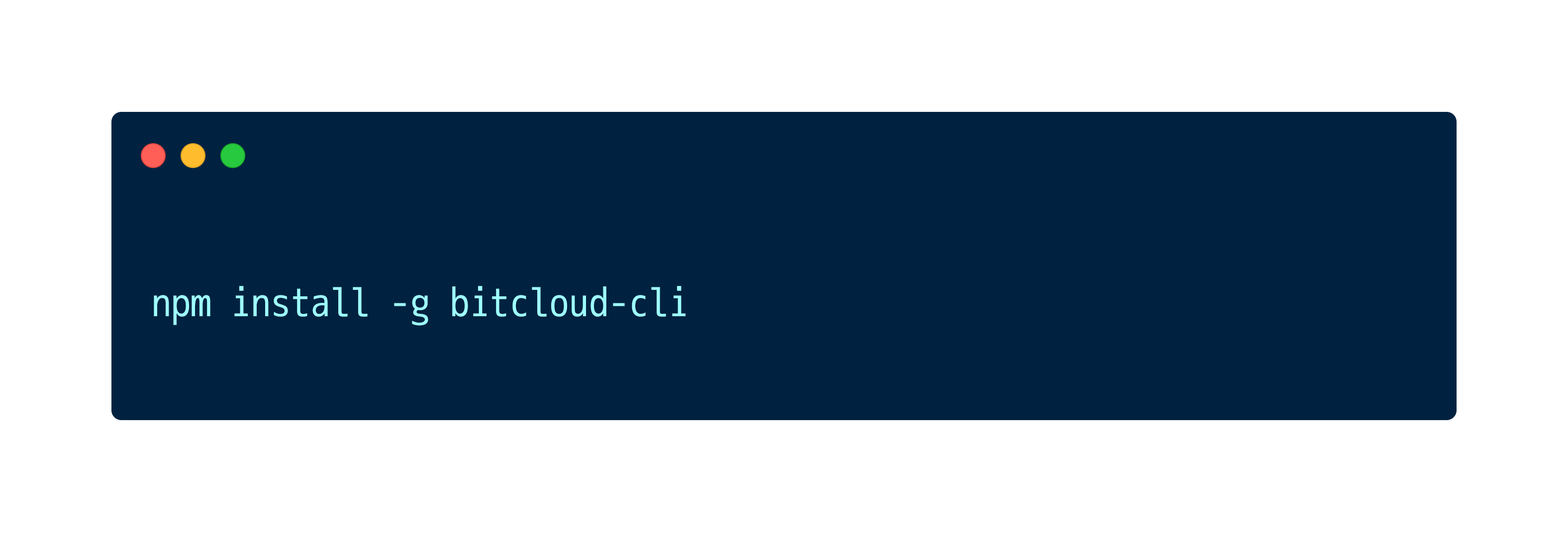
<style>
.page{position:relative;width:1568px;height:533px;background:#ffffff}
.page>*{position:absolute;margin:0}
.t1{font:39.8px "mplus-2m-regular";color:#9effff}
</style>
<div class="page">
<p class="t1" style="left:154px;top:286px;width:532px;height:40px">npm install -g bitcloud-cli</p>
</div>
